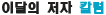
<style>
.page{position:relative;width:106px;height:15px;background:#ffffff}
.page>*{position:absolute;margin:0}
.t1{font:12.5px "HeadlineR-HM";color:#1f1f1d;scale:1.03 1}
.t2{font:12.5px "HeadlineR-HM";color:#05a4c6;scale:1.03 1}
</style>
<div class="page">
<p class="t1" style="left:2px;top:1px;width:102px;height:13px">이달의 저자 <span class="t2">칼럼</span></p>
</div>
